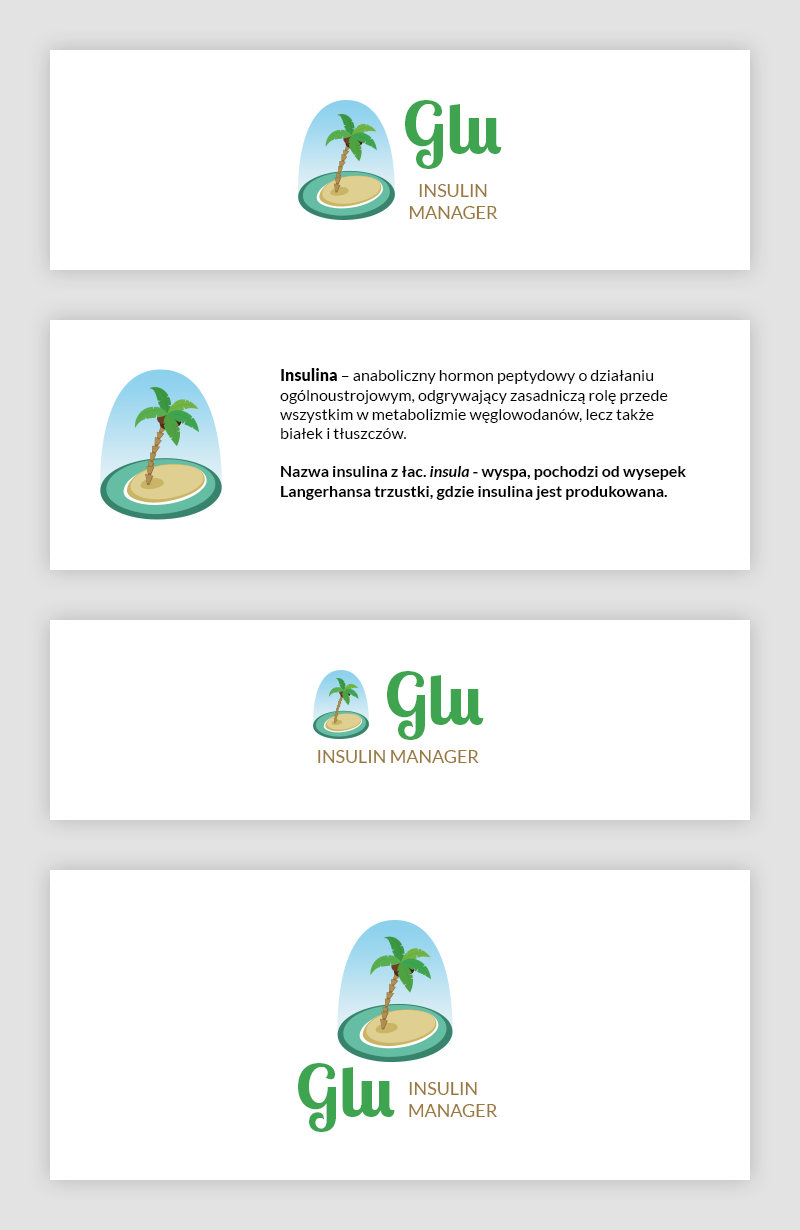
<style>
.page{position:relative;width:800px;height:1230px;background:#ffffff}
.page>*{position:absolute;margin:0}
.t1{font:72.1px "LobsterTwo-Bold";color:#3fa450}
.t2{font:18px "Lato-Regular";color:#9a7940}
.t3{font:16px "Lato-Regular";color:#000000}
.t4{font:16px "Lato-Black";color:#000000}
.t5{font:16px "Lato-Bold";color:#000000}
.t6{font:16px "Lato-BoldItalic";color:#000000}
.t7{font:72px "LobsterTwo-Bold";color:#3fa450}
</style>
<div class="page">
<p class="t1" style="left:405px;top:100px;width:97px;height:69px">Glu</p>
<p class="t2" style="left:409px;top:184px;width:89px;height:35px;text-align:center">INSULIN<br>MANAGER</p>
<p class="t3" style="left:280px;top:368px;width:406px;height:132px"><span class="t4">Insulina</span> – anaboliczny hormon peptydowy o działaniu ogólnoustrojowym, odgrywający zasadniczą rolę przede wszystkim w metabolizmie węglowodanów, lecz także białek i tłuszczów.<br><br><span class="t5">Nazwa insulina z łac. </span><span class="t6">insula</span><span class="t5"> - wyspa, pochodzi od wysepek Langerhansa trzustki, gdzie insulina jest produkowana.</span></p>
<p class="t7" style="left:387px;top:671px;width:97px;height:69px">Glu</p>
<p class="t2" style="left:318px;top:750px;width:161px;height:13px">INSULIN MANAGER</p>
<p class="t7" style="left:298px;top:1063px;width:97px;height:69px">Glu</p>
<p class="t2" style="left:409px;top:1082px;width:88px;height:35px">INSULIN<br>MANAGER</p>
</div>
